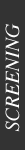
<style>
.page{position:relative;width:25px;height:150px;background:#333333}
.page>*{position:absolute;margin:0}
.t1{font:20px "Times-Italic";color:#fefefe;text-transform:uppercase}
</style>
<div class="page">
<p class="t1" style="left:5px;top:23px;width:15px;height:109px;rotate:-90deg">screening</p>
</div>
